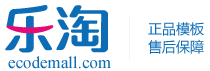
<style>
.page{position:relative;width:210px;height:71px;background:#ffffff}
.page>*{position:absolute;margin:0}
.t1{font:14px/18px "MicrosoftYaHei";color:#0d6cb6}
.t2{font:17px "TimesNewRomanPSMT";color:#0d6cb6}
</style>
<div class="page">
<p class="t1" style="left:148px;top:22px;width:56px;height:32px">正品模板<br>售后保障</p>
<p class="t2" style="left:8px;top:56px;width:103px;height:13px">ecodemall.com</p>
</div>
